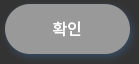
<style>
.page{position:relative;width:139px;height:64px;background:#999999}
.page>*{position:absolute;margin:0}
.t1{font:16px "NotoSansKR-Medium";letter-spacing:0.01em;color:#ffffff}
</style>
<div class="page">
<p class="t1" style="left:53px;top:21px;width:28px;height:16px">확인</p>
</div>
